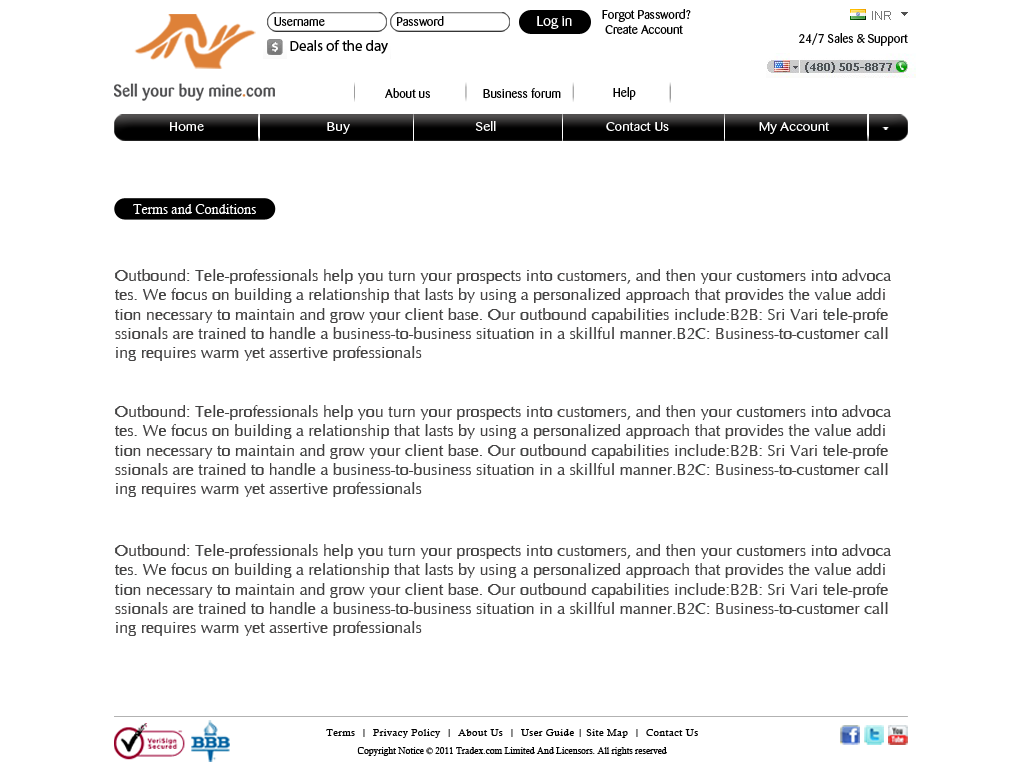
<style>
.page{position:relative;width:1024px;height:768px;background:#ffffff}
.page>*{position:absolute;margin:0}
.t1{font:12px "Barmeno-Regular";color:#000000;scale:1.05 1}
.t2{font:14px "Barmeno-Regular";color:#ffffff;scale:1.05 1}
.t3{font:14.9px "MyriadPro-Regular";color:#000000}
.t4{font:12px "Barmeno-Regular";color:#030303;scale:1.05 1}
.t5{font:12.1px "Barmeno-Regular";color:#ffffff;scale:1.2 1}
.t6{font:13px "CalistoMT";color:#ffffff}
.t7{font:16px "CGOmega";letter-spacing:0.005em;color:#444343}
.t8{font:10px/18px "CalistoMT";letter-spacing:0.045em;color:#000000}
.t9{font:9px/18px "CalistoMT";color:#000000}
</style>
<div class="page">
<p class="t1" style="left:274px;top:17px;width:51px;height:9px">Username</p>
<p class="t1" style="left:397px;top:16px;width:47px;height:10px">Password</p>
<p class="t2" style="left:537px;top:16px;width:35px;height:13px">Log in</p>
<p class="t1" style="left:602px;top:9px;width:89px;height:25px">Forgot Password? <br> Create Account</p>
<p class="t3" style="left:290px;top:40px;width:98px;height:14px">Deals of the day</p>
<p class="t4" style="left:799px;top:33px;width:109px;height:13px">24/7 Sales &amp; Support</p>
<p class="t1" style="left:385px;top:88px;width:45px;height:10px">About us</p>
<p class="t1" style="left:483px;top:88px;width:78px;height:10px">Business forum</p>
<p class="t1" style="left:613px;top:87px;width:23px;height:13px">Help</p>
<p class="t5" style="left:170px;top:121px;width:660px;height:13px">Home                                     Buy                                      Sell                                 Contact Us                           My Account</p>
<p class="t6" style="left:133px;top:204px;width:123px;height:10px">Terms and Conditions</p>
<p class="t7" style="left:115px;top:269px;width:776px;height:92px">Outbound: Tele-professionals help you turn your prospects into customers, and then your customers into advoca<br>tes. We focus on building a relationship that lasts by using a personalized approach that provides the value addi<br>tion necessary to maintain and grow your client base. Our outbound capabilities include:B2B: Sri Vari tele-profe<br>ssionals are trained to handle a business-to-business situation in a skillful manner.B2C: Business-to-customer call<br>ing requires warm yet assertive professionals</p>
<p class="t7" style="left:115px;top:405px;width:776px;height:92px">Outbound: Tele-professionals help you turn your prospects into customers, and then your customers into advoca<br>tes. We focus on building a relationship that lasts by using a personalized approach that provides the value addi<br>tion necessary to maintain and grow your client base. Our outbound capabilities include:B2B: Sri Vari tele-profe<br>ssionals are trained to handle a business-to-business situation in a skillful manner.B2C: Business-to-customer call<br>ing requires warm yet assertive professionals</p>
<p class="t7" style="left:115px;top:544px;width:776px;height:92px">Outbound: Tele-professionals help you turn your prospects into customers, and then your customers into advoca<br>tes. We focus on building a relationship that lasts by using a personalized approach that provides the value addi<br>tion necessary to maintain and grow your client base. Our outbound capabilities include:B2B: Sri Vari tele-profe<br>ssionals are trained to handle a business-to-business situation in a skillful manner.B2C: Business-to-customer call<br>ing requires warm yet assertive professionals</p>
<p class="t8" style="left:326px;top:729px;width:372px;height:27px;text-align:center">Terms  |  Privacy Policy  |  About Us  |  User Guide | Site Map  |  Contact Us<br><span class="t9">Copyright Notice © 2011 Tradex.com Limited And Licensors. All rights reserved</span></p>
</div>
